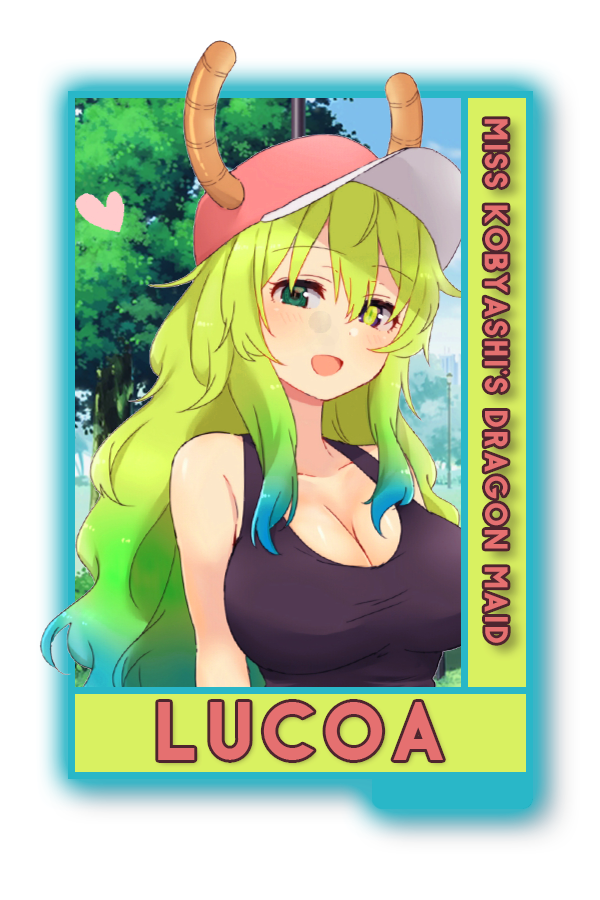
<style>
.page{position:relative;width:600px;height:900px;background:#ffffff}
.page>*{position:absolute;margin:0}
.t1{font:29.2px "Antraste";color:#e0706c}
.t2{font:75px "Antraste";color:#e0706c}
</style>
<div class="page">
<p class="t1" style="left:484px;top:119px;width:24px;height:524px;rotate:90deg">MISS KOBYASHI'S DRAGON MAID</p>
<p class="t2" style="left:158px;top:702px;width:285px;height:58px">LUCOA</p>
</div>
